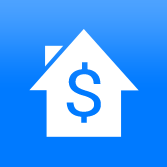
<style>
.page{position:relative;width:167px;height:167px;background:#007aff}
.page>*{position:absolute;margin:0}
.t1{font:65.3px "Roboto-Regular";color:#007aff;scale:1.15 1}
</style>
<div class="page">
<p class="t1" style="left:66px;top:62px;width:35px;height:61px">$</p>
</div>
